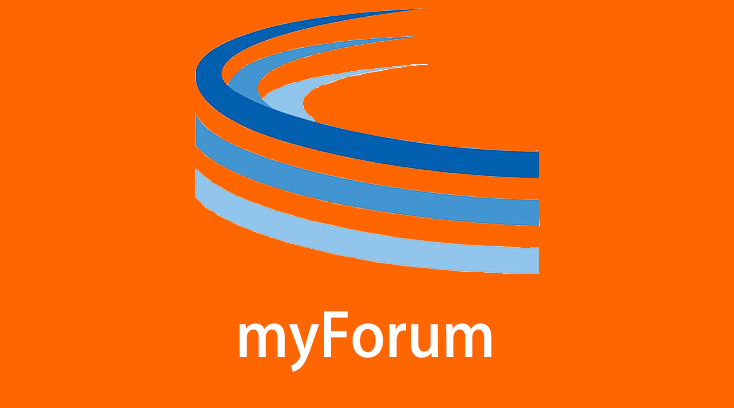
<style>
.page{position:relative;width:734px;height:408px;background:#ff6600}
.page>*{position:absolute;margin:0}
.t1{font:59px "AdobeFanHeitiStd-Bold";color:#ffffff}
</style>
<div class="page">
<p class="t1" style="left:239px;top:311px;width:253px;height:61px">myForum</p>
</div>
